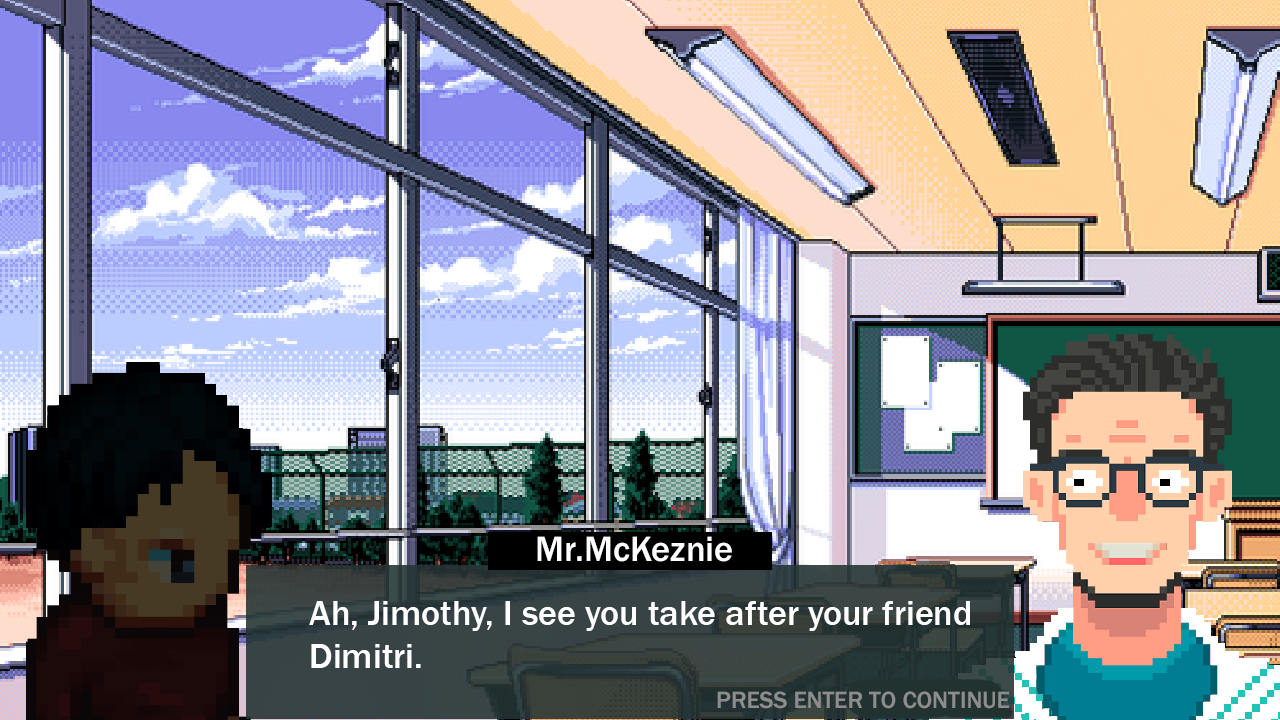
<style>
.page{position:relative;width:1280px;height:720px}
.page>*{position:absolute;margin:0}
.t1{font:36.3px "FranklinGothic-Medium";color:#ffffff}
.t2{font:36px "FranklinGothic-Medium";color:#ffffff}
.t3{font:24.2px "FranklinGothic-Medium";color:#8d8d8d}
</style>
<div class="page">
<p class="t1" style="left:537px;top:536px;width:195px;height:26px">Mr.McKeznie</p>
<p class="t2" style="left:309px;top:601px;width:661px;height:67px">Ah, Jimothy, I see you take after your friend<br>Dimitri.</p>
<p class="t3" style="left:717px;top:691px;width:292px;height:18px">PRESS ENTER TO CONTINUE</p>
</div>
